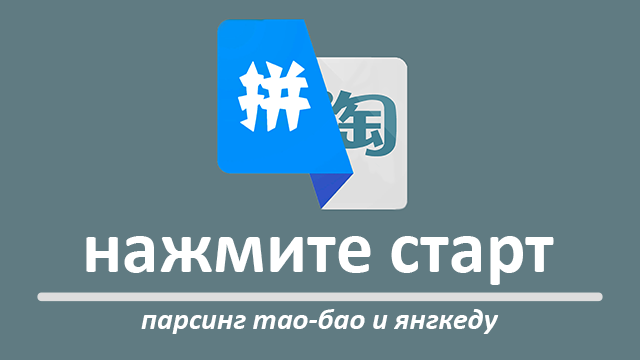
<style>
.page{position:relative;width:640px;height:360px;background:#607b82}
.page>*{position:absolute;margin:0}
.t1{font:74px "Calibri-Bold";color:#ffffff}
.t2{font:30px "Calibri-BoldItalic";color:#ffffff}
</style>
<div class="page">
<p class="t1" style="left:86px;top:236px;width:468px;height:49px">нажмите старт</p>
<p class="t2" style="left:141px;top:309px;width:358px;height:25px">парсинг тао-бао и янгкеду</p>
</div>
